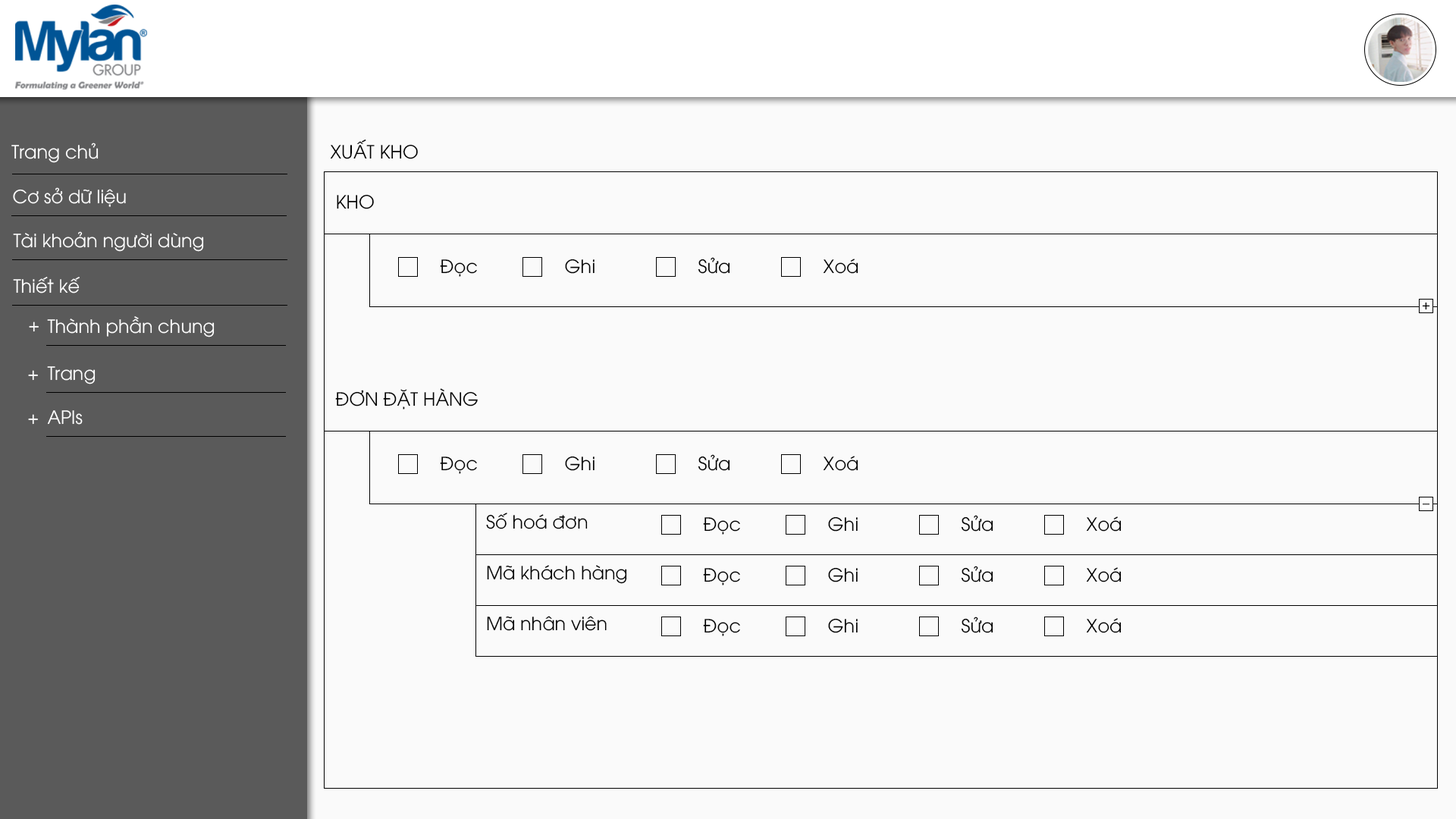
<style>
.page{position:relative;width:1456px;height:819px;background:#fafafa}
.page>*{position:absolute;margin:0}
.t1{font:18.2px "UTM-Avo";color:#000000}
.t2{font:13.6px "UTM-Avo";color:#000000}
.t3{font:18.2px "UTM-Avo";color:#ffffff}
.t4{font:13.6px "UTM-Avo"}
</style>
<div class="page">
<p class="t1" style="left:330px;top:140px;width:88px;height:19px">XUẤT KHO</p>
<p class="t1" style="left:337px;top:194px;width:37px;height:15px">KHO</p>
<p class="t1" style="left:698px;top:257px;width:32px;height:17px">Sửa</p>
<p class="t1" style="left:440px;top:259px;width:37px;height:18px">Đọc</p>
<p class="t1" style="left:565px;top:259px;width:30px;height:15px">Ghi</p>
<p class="t1" style="left:823px;top:259px;width:35px;height:15px">Xoá</p>
<p class="t2" style="left:1422px;top:302px;width:8px;height:8px">+</p>
<p class="t3" style="left:29px;top:322px;width:10px;height:10px">+</p>
<p class="t3" style="left:28px;top:370px;width:10px;height:11px">+</p>
<p class="t1" style="left:335px;top:388px;width:143px;height:21px">ĐƠN ĐẶT HÀNG</p>
<p class="t3" style="left:28px;top:414px;width:10px;height:11px">+</p>
<p class="t1" style="left:440px;top:457px;width:37px;height:17px">Đọc</p>
<p class="t1" style="left:565px;top:456px;width:30px;height:15px">Ghi</p>
<p class="t1" style="left:698px;top:454px;width:32px;height:17px">Sửa</p>
<p class="t1" style="left:823px;top:456px;width:35px;height:15px">Xoá</p>
<p class="t4" style="left:1422px;top:504px;width:8px;height:1px">_</p>
<p class="t1" style="left:486px;top:513px;width:102px;height:16px">Số hoá đơn</p>
<p class="t1" style="left:703px;top:517px;width:37px;height:18px">Đọc</p>
<p class="t1" style="left:828px;top:516px;width:30px;height:16px">Ghi</p>
<p class="t1" style="left:961px;top:515px;width:32px;height:17px">Sửa</p>
<p class="t1" style="left:1086px;top:516px;width:36px;height:16px">Xoá</p>
<p class="t1" style="left:487px;top:565px;width:140px;height:19px">Mã khách hàng</p>
<p class="t1" style="left:703px;top:568px;width:37px;height:17px">Đọc</p>
<p class="t1" style="left:828px;top:567px;width:30px;height:15px">Ghi</p>
<p class="t1" style="left:961px;top:566px;width:32px;height:16px">Sửa</p>
<p class="t1" style="left:1086px;top:567px;width:36px;height:15px">Xoá</p>
<p class="t1" style="left:487px;top:616px;width:120px;height:15px">Mã nhân viên</p>
<p class="t1" style="left:961px;top:617px;width:32px;height:16px">Sửa</p>
<p class="t1" style="left:703px;top:619px;width:37px;height:17px">Đọc</p>
<p class="t1" style="left:828px;top:618px;width:30px;height:15px">Ghi</p>
<p class="t1" style="left:1086px;top:618px;width:36px;height:15px">Xoá</p>
</div>
